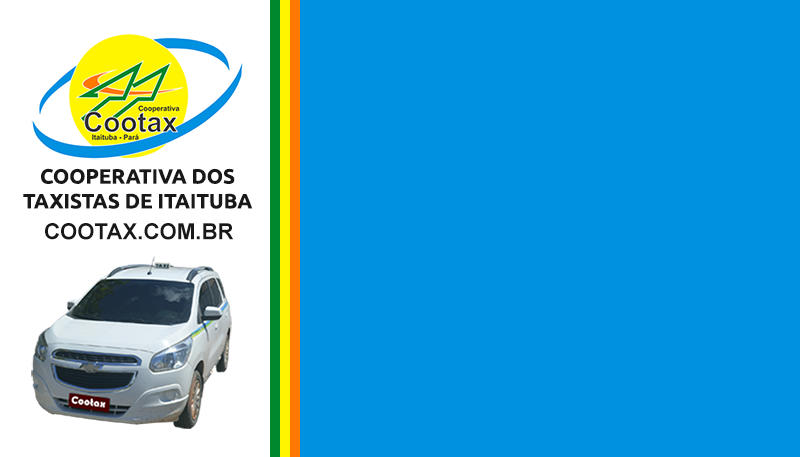
<style>
.page{position:relative;width:800px;height:457px;background:#0091e1}
.page>*{position:absolute;margin:0}
.t1{font:20.6px "Ubuntu-Bold";color:#181818;text-transform:uppercase}
.t2{font:22.2px "Arial-BoldMT";color:#181818;text-transform:uppercase}
</style>
<div class="page">
<p class="t1" style="left:23px;top:168px;width:229px;height:41px;text-align:center">Cooperativa dos<br>Taxistas de Itaituba</p>
<p class="t2" style="left:45px;top:223px;width:189px;height:17px">cootax.com.br</p>
</div>
